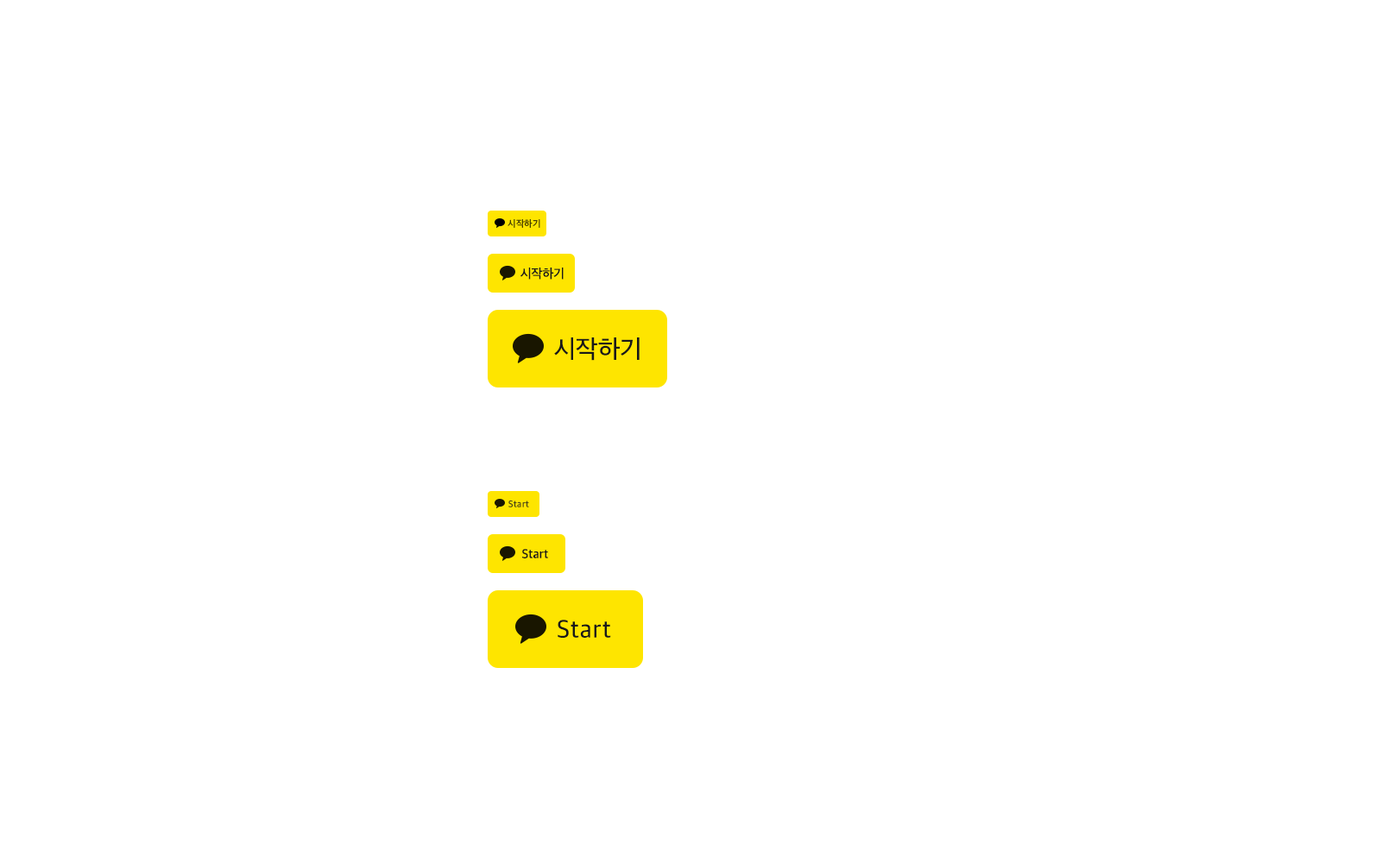
<style>
.page{position:relative;width:1381px;height:863px;background:#ffffff}
.page>*{position:absolute;margin:0}
.t1{font:9.5px "AppleSDGothicNeo-Medium";letter-spacing:-0.01em;color:#473f00}
.t2{font:12.9px "AppleSDGothicNeo-Medium";letter-spacing:-0.01em;color:#191919}
.t3{font:25.9px "AppleSDGothicNeo-Medium";letter-spacing:-0.01em;color:#191919}
.t4{font:9.5px "AppleSDGothicNeo-Medium";letter-spacing:0.025em;color:#524b15}
.t5{font:12.9px "AppleSDGothicNeo-Medium";letter-spacing:0.01em;color:#191919}
.t6{font:25.9px "AppleSDGothicNeo-Medium";letter-spacing:0.025em;color:#191919}
</style>
<div class="page">
<p class="t1" style="left:508px;top:219px;width:32px;height:9px">시작하기</p>
<p class="t2" style="left:521px;top:268px;width:43px;height:12px">시작하기</p>
<p class="t3" style="left:554px;top:338px;width:86px;height:23px">시작하기</p>
<p class="t4" style="left:508px;top:500px;width:21px;height:8px">Start</p>
<p class="t5" style="left:522px;top:549px;width:26px;height:10px">Start</p>
<p class="t6" style="left:558px;top:620px;width:53px;height:18px">Start</p>
</div>
